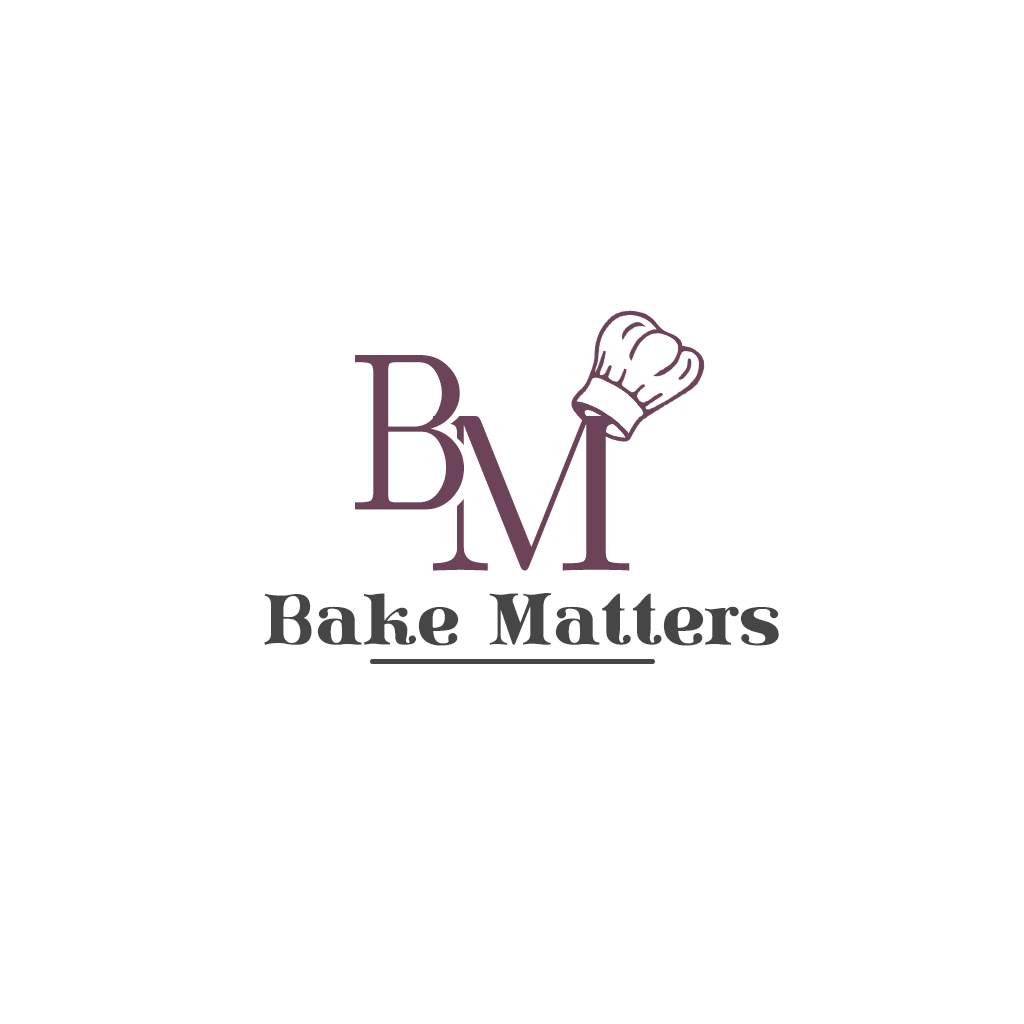
<style>
.page{position:relative;width:1024px;height:1024px;background:#ffffff}
.page>*{position:absolute;margin:0}
.t1{font:239.8px "CMUSerif-Roman";scale:0.8 1}
.t2{font:225.7px "CMUSerif-Roman";color:#6d435a;scale:0.78 1}
.t3{font:73px "LissainDidone";color:#464646}
</style>
<div class="page">
<p class="t1" style="left:355px;top:351px;width:118px;height:165px">B</p>
<p class="t2" style="left:355px;top:355px;width:109px;height:155px">B</p>
<p class="t3" style="left:264px;top:593px;width:515px;height:53px">Bake Matters</p>
</div>
